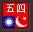
<style>
.page{position:relative;width:33px;height:32px;background:#333333}
.page>*{position:absolute;margin:0}
.t1{font:10.4px "SimSun";color:#ffffff}
</style>
<div class="page">
<p class="t1" style="left:7px;top:4px;width:18px;height:9px">五四</p>
</div>
